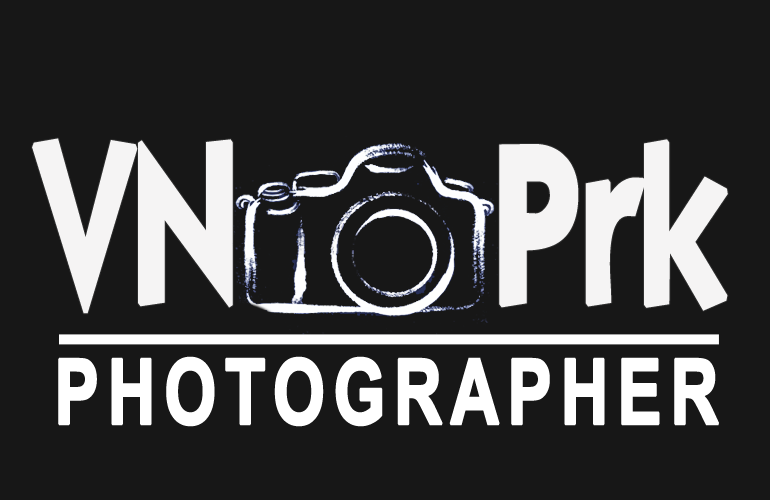
<style>
.page{position:relative;width:770px;height:500px;background:#171717}
.page>*{position:absolute;margin:0}
.t1{font:219.1px "Elegance";color:#f4f3f3;font-weight:bold;scale:0.76 1}
.t2{font:90.2px "Arial-BoldMT";letter-spacing:0.1em;color:#ffffff;font-weight:bold;scale:0.74 1}
</style>
<div class="page">
<p class="t1" style="left:32px;top:138px;width:696px;height:176px">VN   Prk</p>
<p class="t2" style="left:58px;top:356px;width:661px;height:71px">PHOTOGRAPHER</p>
</div>
